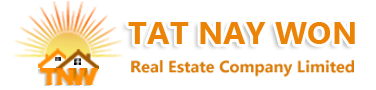
<style>
.page{position:relative;width:376px;height:90px;background:#ffffff}
.page>*{position:absolute;margin:0}
.t1{font:31.5px "MyanmarText-Bold";color:#eb8406}
.t2{font:16.1px "MyanmarText-Bold";color:#db7c0a}
</style>
<div class="page">
<p class="t1" style="left:128px;top:22px;width:227px;height:22px">TAT NAY WON</p>
<p class="t2" style="left:131px;top:60px;width:223px;height:17px">Real Estate Company Limited</p>
</div>
